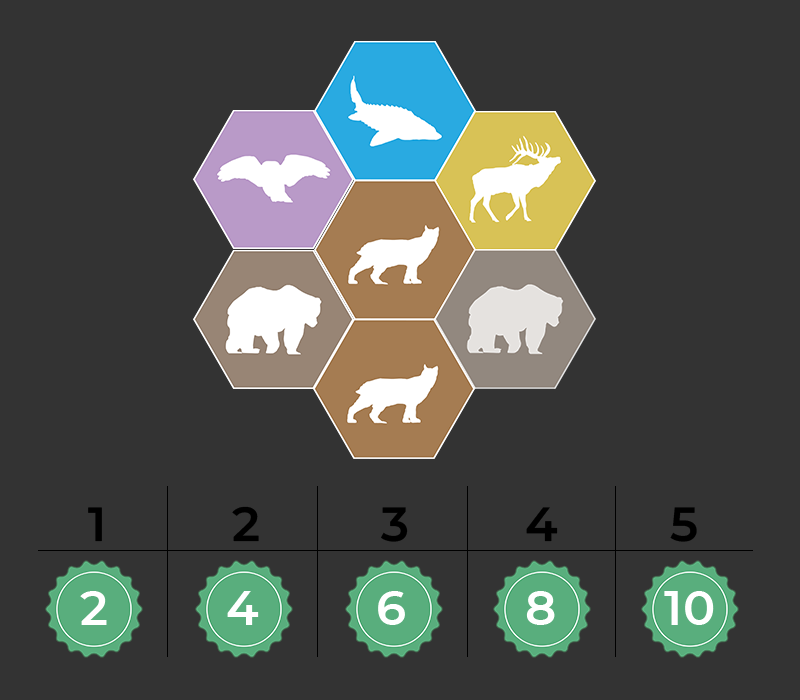
<style>
.page{position:relative;width:800px;height:700px;background:#333333}
.page>*{position:absolute;margin:0}
.t1{font:48px "MontserratRoman-SemiBold";color:#000000}
.t2{font:48px "Montserrat-SemiBold";color:#ffffff}
</style>
<div class="page">
<p class="t1" style="left:88px;top:507px;width:14px;height:35px">1</p>
<p class="t1" style="left:232px;top:506px;width:27px;height:36px">2</p>
<p class="t1" style="left:381px;top:507px;width:27px;height:35px">3</p>
<p class="t1" style="left:526px;top:507px;width:32px;height:35px">4</p>
<p class="t1" style="left:670px;top:507px;width:27px;height:35px">5</p>
<p class="t2" style="left:80px;top:591px;width:27px;height:34px">2</p>
<p class="t2" style="left:227px;top:591px;width:32px;height:34px">4</p>
<p class="t2" style="left:378px;top:591px;width:27px;height:34px">6</p>
<p class="t2" style="left:526px;top:591px;width:29px;height:34px">8</p>
<p class="t2" style="left:664px;top:591px;width:50px;height:34px">10</p>
</div>
